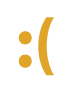
<style>
.page{position:relative;width:72px;height:96px;background:#ffffff}
.page>*{position:absolute;margin:0}
.t1{font:72px "MyriadPro-Bold";color:#e0a528}
</style>
<div class="page">
<p class="t1" style="left:18px;top:17px;width:36px;height:59px">:(</p>
</div>
